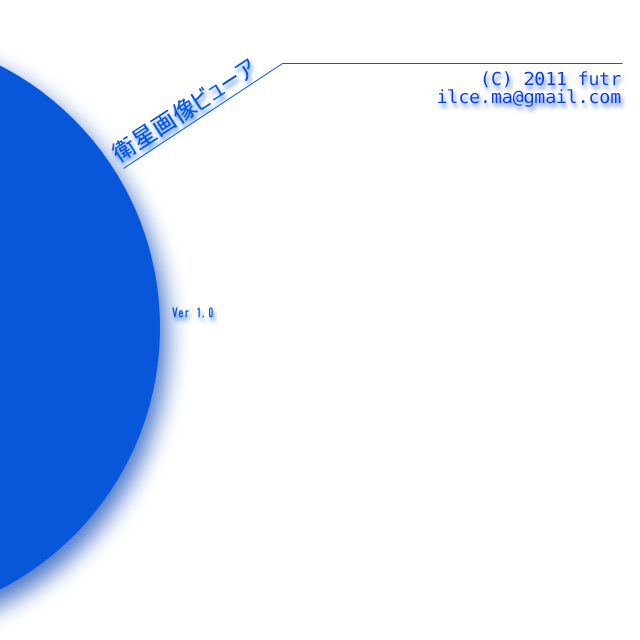
<style>
.page{position:relative;width:640px;height:640px;background:#ffffff}
.page>*{position:absolute;margin:0}
.t1{font:24px "MS-UIGothic";color:#0857db}
.t2{font:18px/18px "BitstreamVeraSansMono-Roman";color:#053fe4}
.t3{font:12px "HGGothicE";color:#0857db}
</style>
<div class="page">
<p class="t1" style="left:111px;top:58px;width:139px;height:105px;rotate:-33deg">衛星画像ビューア</p>
<p class="t2" style="left:438px;top:71px;width:183px;height:36px;text-align:right">(C) 2011 futr<br>ilce.ma@gmail.com</p>
<p class="t3" style="left:172px;top:307px;width:41px;height:11px">Ver 1.0</p>
</div>
